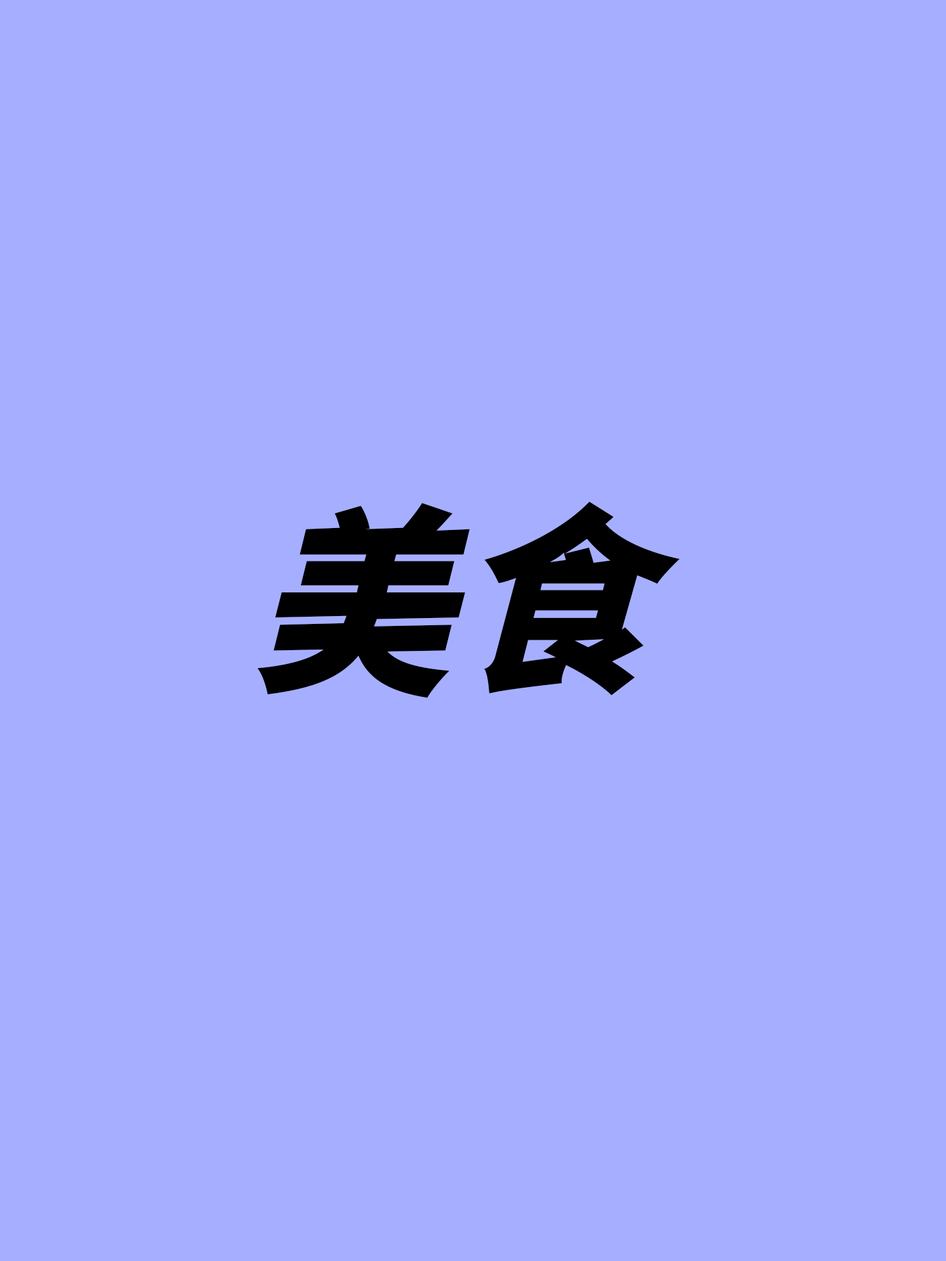
<style>
.page{position:relative;width:946px;height:1261px;background:#a6afff}
.page>*{position:absolute;margin:0}
.t1{font:199.5px "Source-KeynoteartHans-Regular";color:#000000}
</style>
<div class="page">
<p class="t1" style="left:257px;top:501px;width:423px;height:197px">美食</p>
</div>
